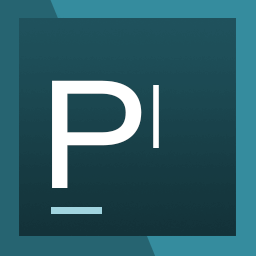
<style>
.page{position:relative;width:256px;height:256px}
.page>*{position:absolute;margin:0}
.t1{font:150.8px "AcuminConcept-Wide";color:#ffffff}
.t2{font:88.4px "AcuminConcept-WideExtraLight";color:#ffffff}
</style>
<div class="page">
<p class="t1" style="left:52px;top:80px;width:90px;height:108px">P</p>
<p class="t1" style="left:52px;top:80px;width:90px;height:108px">P</p>
<p class="t2" style="left:153px;top:85px;width:6px;height:63px">I</p>
</div>
